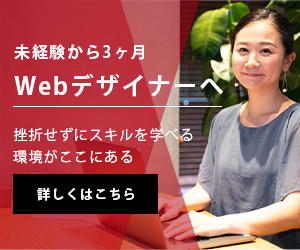
<style>
.page{position:relative;width:300px;height:250px}
.page>*{position:absolute;margin:0}
.t1{font:16px "KozGoPr6N-Bold";letter-spacing:0.1em;color:#ffffff}
.t2{font:24px "KozGoPr6N-Bold";letter-spacing:0.08em;color:#ffffff}
.t3{font:14px/22.4px "KozGoPr6N-Regular";letter-spacing:0.08em;color:#ffffff}
.t4{font:13px "KozGoPr6N-Bold";letter-spacing:0.1em;color:#ffffff}
</style>
<div class="page">
<p class="t1" style="left:14px;top:44px;width:130px;height:16px">未経験から3ヶ月</p>
<p class="t2" style="left:14px;top:73px;width:209px;height:24px">Webデザイナーへ</p>
<p class="t3" style="left:13px;top:127px;width:180px;height:37px">挫折せずにスキルを学べる<br>環境がここにある</p>
<p class="t4" style="left:37px;top:187px;width:97px;height:14px">詳しくはこちら</p>
</div>
